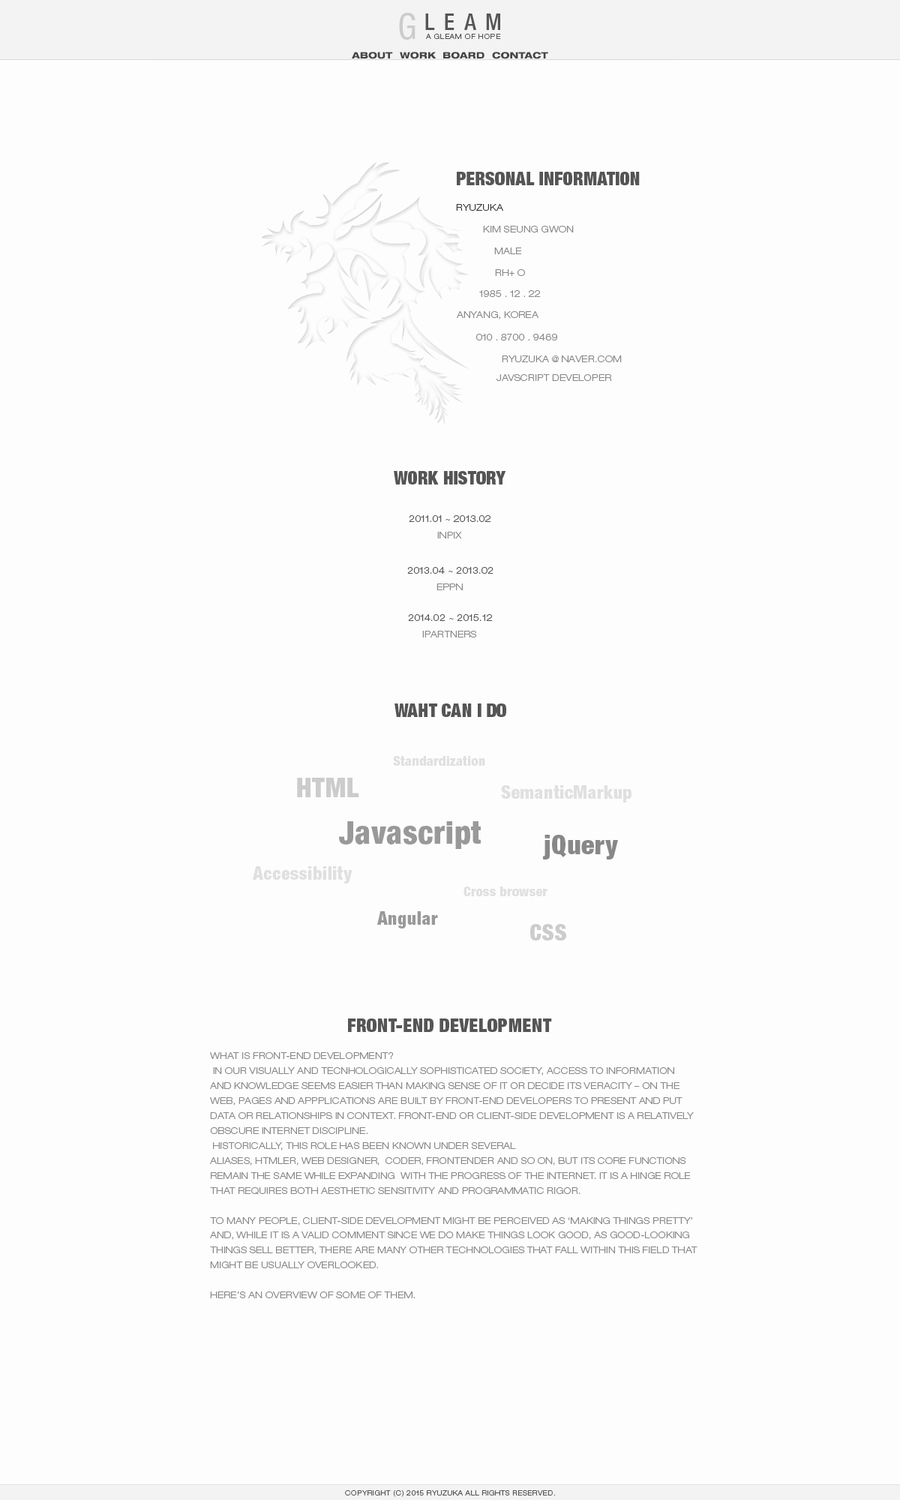
<style>
.page{position:relative;width:900px;height:1500px;background:#fdfdfd}
.page>*{position:absolute;margin:0}
.t1{font:36px "HelveticaNeueLTStd-Cn";letter-spacing:0.04em;color:#cccccc}
.t2{font:22.5px "HelveticaNeueLTStd-MdCn";letter-spacing:0.42em;color:#555555}
.t3{font:6.7px "HelveticaNeueLTStd-LtEx";letter-spacing:0.08em;color:#555555}
.t4{font:9px "HelveticaNeueLTStd-HvEx";color:#444444}
.t5{font:18px "HelveticaNeueLTStd-XBlkCn";color:#555555}
.t6{font:9px "HelveticaNeueLTStd-LtEx";letter-spacing:0.02em;color:#333333}
.t7{font:9px "HelveticaNeueLTStd-LtEx";letter-spacing:0.02em;color:#888888}
.t8{font:9px "HelveticaNeueLTStd-LtEx";letter-spacing:0.02em;color:#555555}
.t9{font:13.5px "HelveticaNeueLTStd-BlkCn";letter-spacing:0.02em;color:#cccccc}
.t10{font:27px "HelveticaNeueLTStd-BlkCn";letter-spacing:0.02em;color:#cccccc}
.t11{font:18px "HelveticaNeueLTStd-BlkCn";letter-spacing:0.02em;color:#cccccc}
.t12{font:31.5px "HelveticaNeueLTStd-BlkCn";letter-spacing:0.02em;color:#999999}
.t13{font:27px "HelveticaNeueLTStd-BlkCn";letter-spacing:0.02em;color:#888888}
.t14{font:18px "HelveticaNeueLTStd-BlkCn";letter-spacing:0.02em;color:#999999}
.t15{font:22.5px "HelveticaNeueLTStd-BlkCn";letter-spacing:0.02em;color:#cccccc}
.t16{font:18px "HelveticaNeueLTStd-XBlkCn";letter-spacing:0.02em;color:#555555}
.t17{font:9px/15px "HelveticaNeueLTStd-LtEx";letter-spacing:0.02em;color:#888888}
.t18{font:6.7px "HelveticaNeueLTStd-LtEx";letter-spacing:0.05em;color:#555555}
</style>
<div class="page">
<p class="t1" style="left:399px;top:13px;width:16px;height:27px">G</p>
<p class="t2" style="left:425px;top:13px;width:75px;height:17px">LEAM</p>
<p class="t3" style="left:426px;top:34px;width:75px;height:5px">A GLEAM OF HOPE</p>
<p class="t4" style="left:352px;top:52px;width:41px;height:7px">ABOUT</p>
<p class="t4" style="left:400px;top:52px;width:36px;height:7px">WORK</p>
<p class="t4" style="left:443px;top:52px;width:41px;height:7px">BOARD</p>
<p class="t4" style="left:492px;top:52px;width:56px;height:7px">CONTACT</p>
<p class="t5" style="left:457px;top:172px;width:183px;height:13px">PERSONAL INFORMATION</p>
<p class="t6" style="left:456px;top:204px;width:47px;height:7px">RYUZUKA</p>
<p class="t7" style="left:483px;top:226px;width:91px;height:6px">KIM SEUNG GWON</p>
<p class="t7" style="left:494px;top:247px;width:28px;height:7px">MALE</p>
<p class="t7" style="left:495px;top:269px;width:30px;height:7px">RH+ O</p>
<p class="t7" style="left:479px;top:290px;width:62px;height:7px">1985 . 12 . 22</p>
<p class="t7" style="left:457px;top:311px;width:81px;height:8px">ANYANG, KOREA</p>
<p class="t7" style="left:476px;top:334px;width:81px;height:6px">010 . 8700 . 9469</p>
<p class="t7" style="left:502px;top:355px;width:120px;height:7px">RYUZUKA @ NAVER.COM</p>
<p class="t7" style="left:496px;top:374px;width:115px;height:7px">JAVSCRIPT DEVELOPER</p>
<p class="t5" style="left:394px;top:471px;width:112px;height:13px">WORK HISTORY</p>
<p class="t8" style="left:409px;top:515px;width:82px;height:7px">2011.01 ~ 2013.02</p>
<p class="t7" style="left:437px;top:532px;width:25px;height:6px">INPIX</p>
<p class="t8" style="left:407px;top:567px;width:86px;height:7px">2013.04 ~ 2013.02</p>
<p class="t7" style="left:436px;top:583px;width:27px;height:7px">EPPN</p>
<p class="t8" style="left:408px;top:614px;width:85px;height:7px">2014.02 ~ 2015.12</p>
<p class="t7" style="left:422px;top:631px;width:55px;height:6px">IPARTNERS</p>
<p class="t5" style="left:394px;top:703px;width:112px;height:14px">WAHT CAN I DO</p>
<p class="t9" style="left:393px;top:756px;width:92px;height:10px;opacity:0.6">Standardization</p>
<p class="t10" style="left:297px;top:778px;width:62px;height:19px">HTML</p>
<p class="t11" style="left:501px;top:785px;width:130px;height:17px;opacity:0.6">SemanticMarkup</p>
<p class="t12" style="left:339px;top:821px;width:142px;height:28px">Javascript</p>
<p class="t13" style="left:543px;top:835px;width:75px;height:24px">jQuery</p>
<p class="t11" style="left:253px;top:866px;width:99px;height:17px;opacity:0.6">Accessibility</p>
<p class="t9" style="left:463px;top:886px;width:84px;height:10px;opacity:0.6">Cross browser</p>
<p class="t14" style="left:377px;top:911px;width:61px;height:17px">Angular</p>
<p class="t15" style="left:530px;top:924px;width:36px;height:16px">CSS</p>
<p class="t16" style="left:348px;top:1018px;width:204px;height:14px">FRONT-END DEVELOPMENT</p>
<p class="t17" style="left:210px;top:1052px;width:487px;height:246px;text-align:justify">WHAT IS FRONT-END DEVELOPMENT?<br> IN OUR VISUALLY AND TECNHOLOGICALLY SOPHISTICATED SOCIETY, ACCESS TO INFORMATION <br>AND KNOWLEDGE SEEMS EASIER THAN MAKING SENSE OF IT OR DECIDE ITS VERACITY – ON THE <br>WEB, PAGES AND APPPLICATIONS ARE BUILT BY FRONT-END DEVELOPERS TO PRESENT AND PUT <br>DATA OR RELATIONSHIPS IN CONTEXT. FRONT-END OR CLIENT-SIDE DEVELOPMENT IS A RELATIVELY <br>OBSCURE INTERNET DISCIPLINE. <br> HISTORICALLY, THIS ROLE HAS BEEN KNOWN UNDER SEVERAL <br>ALIASES, HTMLER, WEB DESIGNER,  CODER, FRONTENDER AND SO ON, BUT ITS CORE FUNCTIONS <br>REMAIN THE SAME WHILE EXPANDING  WITH THE PROGRESS OF THE INTERNET. IT IS A HINGE ROLE <br>THAT REQUIRES BOTH AESTHETIC SENSITIVITY AND PROGRAMMATIC RIGOR.<br><br>TO MANY PEOPLE, CLIENT-SIDE DEVELOPMENT MIGHT BE PERCEIVED AS ‘MAKING THINGS PRETTY’<br>AND, WHILE IT IS A VALID COMMENT SINCE WE DO MAKE THINGS LOOK GOOD, AS GOOD-LOOKING<br>THINGS SELL BETTER, THERE ARE MANY OTHER TECHNOLOGIES THAT FALL WITHIN THIS FIELD THAT<br>MIGHT BE USUALLY OVERLOOKED.<br><br>HERE’S AN OVERVIEW OF SOME OF THEM.</p>
<p class="t18" style="left:345px;top:1490px;width:210px;height:7px">COPYRIGHT (C) 2015 RYUZUKA ALL RIGHTS RESERVED.</p>
</div>
